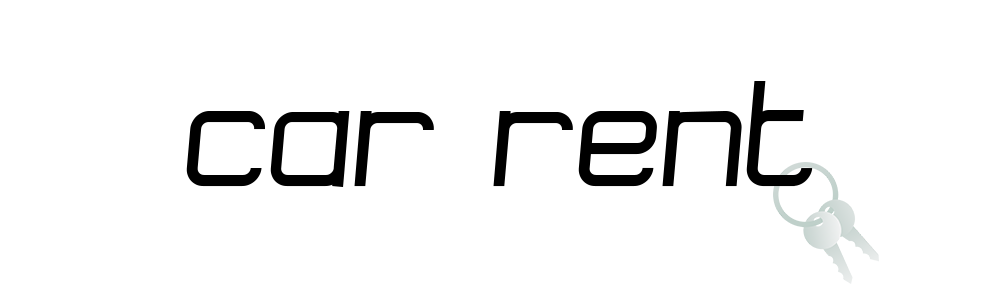
<style>
.page{position:relative;width:1000px;height:300px;background:#ffffff}
.page>*{position:absolute;margin:0}
.t1{font:150px "LogoDesignersDream";color:#000000}
</style>
<div class="page">
<p class="t1" style="left:186px;top:81px;width:627px;height:106px">Car Rent</p>
</div>
